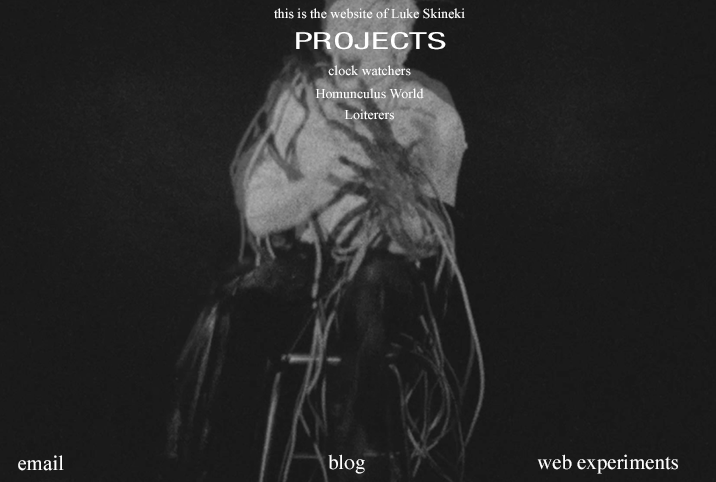
<style>
.page{position:relative;width:716px;height:482px;background:#1a1a1a}
.page>*{position:absolute;margin:0}
.t1{font:13.8px "TimesNewRomanPSMT";color:#ffffff}
.t2{font:23.6px "HelveticaNeueLTStd-Cn";color:#ffffff;scale:1.65 1}
.t3{font:20.8px "TimesNewRomanPSMT";color:#ffffff}
.t4{font:20.8px "Times-Roman";color:#ffffff}
</style>
<div class="page">
<p class="t1" style="left:274px;top:8px;width:191px;height:11px">this is the website of Luke Skineki</p>
<p class="t2" style="left:296px;top:32px;width:150px;height:18px">PROJECTS</p>
<p class="t1" style="left:328px;top:65px;width:83px;height:11px">clock watchers</p>
<p class="t1" style="left:315px;top:88px;width:109px;height:11px">Homunculus World</p>
<p class="t1" style="left:344px;top:109px;width:50px;height:11px">Loiterers</p>
<p class="t3" style="left:18px;top:455px;width:46px;height:16px">email</p>
<p class="t4" style="left:328px;top:454px;width:37px;height:20px">blog</p>
<p class="t4" style="left:537px;top:454px;width:141px;height:20px">web experiments</p>
</div>
